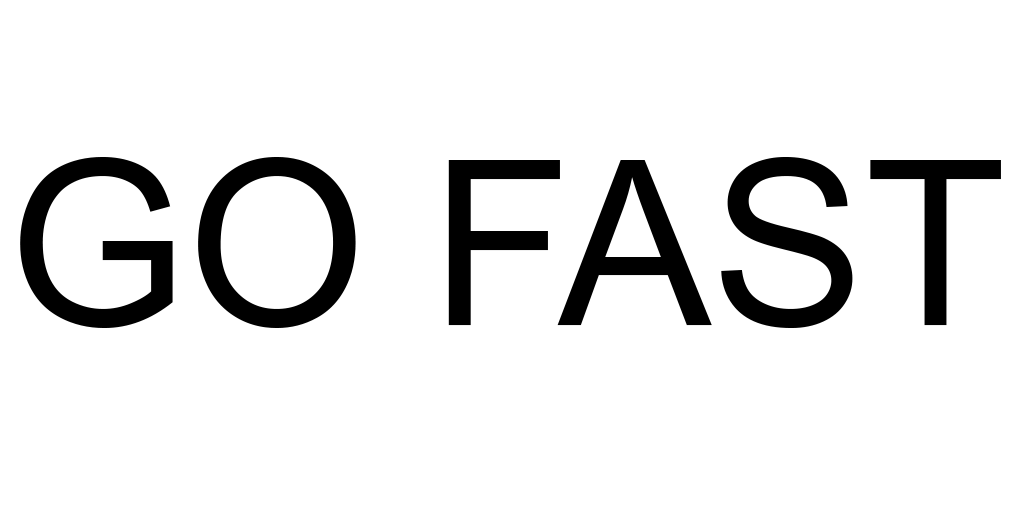
<style>
.page{position:relative;width:1024px;height:512px;background:#ffffff}
.page>*{position:absolute;margin:0}
.t1{font:230px "ArialMT";color:#000000}
</style>
<div class="page">
<p class="t1" style="left:20px;top:157px;width:981px;height:171px">GO FAST</p>
</div>
